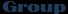
<style>
.page{position:relative;width:68px;height:14px;background:#000000}
.page>*{position:absolute;margin:0}
.t1{font:16px "BritannicBold";color:#253947;scale:1.47 1}
.t2{font:16px "BritannicBold";color:#203c59;scale:1.47 1}
</style>
<div class="page">
<p class="t1" style="left:2px;top:1px;width:64px;height:14px">Group</p>
<p class="t2" style="left:2px;top:1px;width:64px;height:14px">Group</p>
</div>
